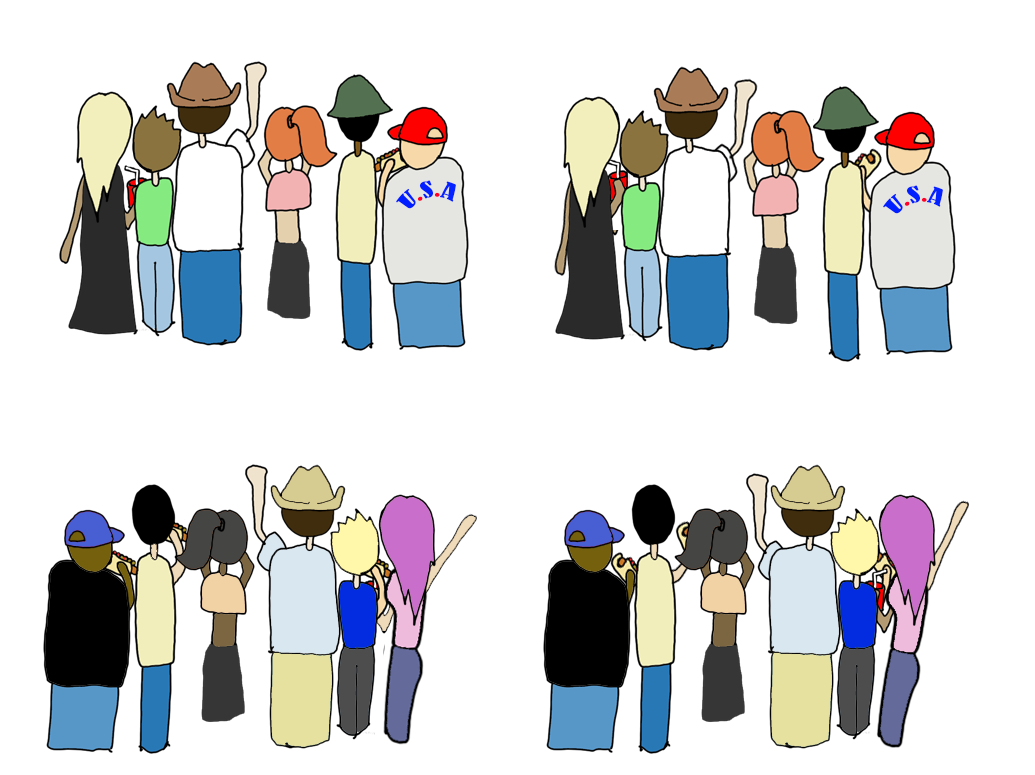
<style>
.page{position:relative;width:1035px;height:775px;background:#ffffff}
.page>*{position:absolute;margin:0}
.t1{font:20.5px "BernardMT-Condensed";color:#001eff}
.t2{font:20.5px "BernardMT-Condensed";color:#ff012c}
.t3{font:20.5px "BernardMT-Condensed";color:#ff002a}
.t4{font:20.5px "BernardMT-Condensed";color:#0421ff}
</style>
<div class="page">
<p class="t1" style="left:396px;top:180px;width:60px;height:29px;rotate:-12deg">U<span class="t2">.</span>S<span class="t3">.</span><span class="t4">A</span></p>
<p class="t1" style="left:883px;top:185px;width:60px;height:29px;rotate:-12deg">U<span class="t2">.</span>S<span class="t3">.</span><span class="t4">A</span></p>
</div>
